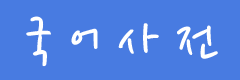
<style>
.page{position:relative;width:240px;height:80px;background:#487be1}
.page>*{position:absolute;margin:0}
.t1{font:60px "NanumPenOTF";color:#ffffff}
</style>
<div class="page">
<p class="t1" style="left:26px;top:16px;width:192px;height:51px">국 어 사 전</p>
</div>
